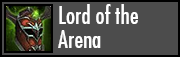
<style>
.page{position:relative;width:180px;height:57px;background:#4c4c4c}
.page>*{position:absolute;margin:0}
.t1{font:24px/24px "FuturaCondensed";color:#ffffff}
</style>
<div class="page">
<p class="t1" style="left:58px;top:4px;width:80px;height:44px;text-align:right">Lord of the Arena</p>
</div>
